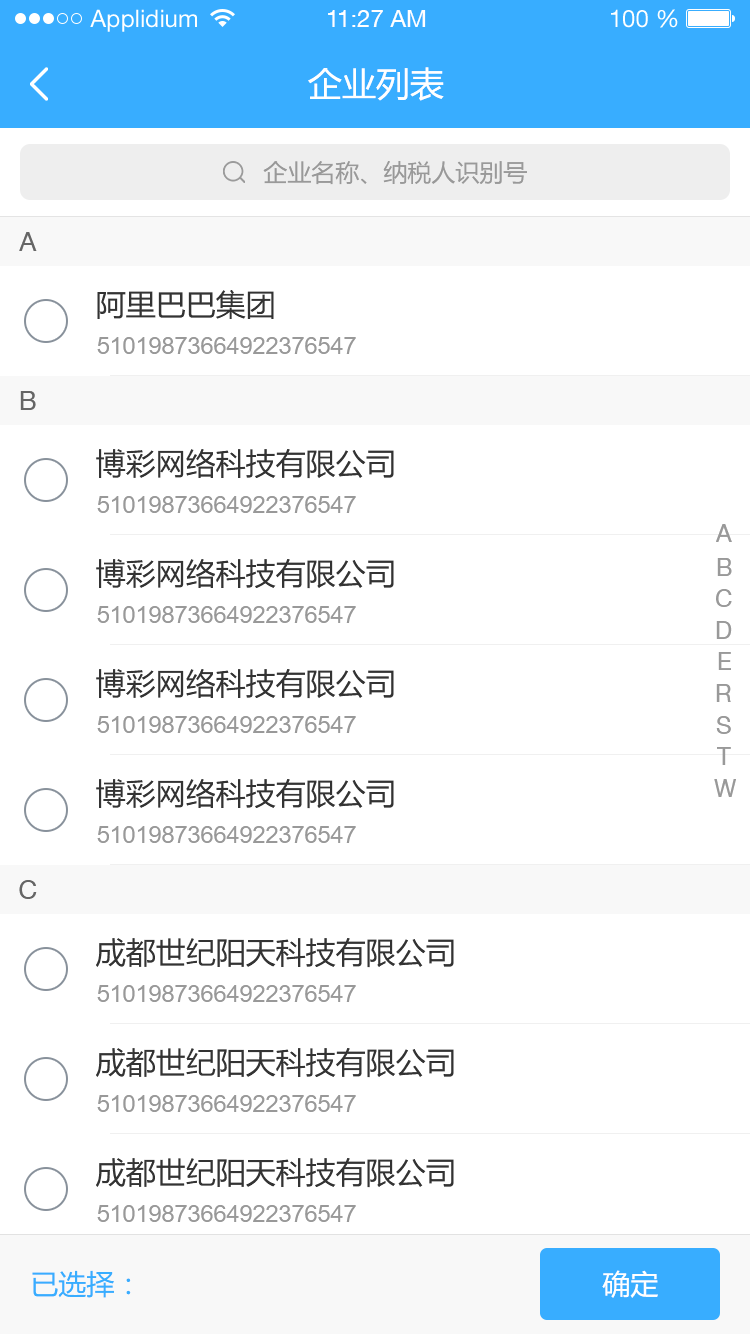
<style>
.page{position:relative;width:750px;height:1334px;background:#ffffff}
.page>*{position:absolute;margin:0}
.t1{font:24px "HelveticaNeueLTStd-Roman";color:#ffffff}
.t2{font:24px "HelveticaNeueCE-Roman";color:#ffffff}
.t3{font:34px "MicrosoftYaHei";color:#ffffff}
.t4{font:24px "MicrosoftYaHei";color:#999999}
.t5{font:26px "HelveticaNeueLTPro-Roman";color:#666666}
.t6{font:30px "MicrosoftYaHei";color:#333333}
.t7{font:24px "ArialMT";color:#999999}
.t8{font:24px "HelveticaNeueLTPro-Roman";color:#999999}
.t9{font:28px "MicrosoftYaHei";color:#38adff}
.t10{font:28px "MicrosoftYaHei";color:#ffffff}
</style>
<div class="page">
<p class="t1" style="left:90px;top:9px;width:107px;height:23px">Applidium</p>
<p class="t2" style="left:328px;top:10px;width:98px;height:17px">11:27 AM</p>
<p class="t1" style="left:611px;top:9px;width:67px;height:19px">100 %</p>
<p class="t3" style="left:308px;top:67px;width:136px;height:34px">企业列表</p>
<p class="t4" style="left:263px;top:161px;width:264px;height:24px">企业名称、纳税人识别号</p>
<p class="t5" style="left:19px;top:232px;width:18px;height:19px">A</p>
<p class="t6" style="left:97px;top:290px;width:177px;height:29px">阿里巴巴集团</p>
<p class="t7" style="left:97px;top:337px;width:259px;height:17px">51019873664922376547</p>
<p class="t5" style="left:20px;top:391px;width:16px;height:19px">B</p>
<p class="t6" style="left:96px;top:449px;width:298px;height:30px">博彩网络科技有限公司</p>
<p class="t7" style="left:97px;top:496px;width:259px;height:17px">51019873664922376547</p>
<p class="t8" style="left:716px;top:524px;width:16px;height:18px">A</p>
<p class="t8" style="left:717px;top:558px;width:15px;height:18px">B</p>
<p class="t6" style="left:96px;top:559px;width:298px;height:30px">博彩网络科技有限公司</p>
<p class="t8" style="left:716px;top:589px;width:16px;height:18px">C</p>
<p class="t7" style="left:97px;top:606px;width:259px;height:17px">51019873664922376547</p>
<p class="t8" style="left:716px;top:621px;width:16px;height:18px">D</p>
<p class="t8" style="left:718px;top:652px;width:13px;height:18px">E</p>
<p class="t6" style="left:96px;top:669px;width:298px;height:30px">博彩网络科技有限公司</p>
<p class="t8" style="left:716px;top:684px;width:15px;height:18px">R</p>
<p class="t7" style="left:97px;top:716px;width:259px;height:17px">51019873664922376547</p>
<p class="t8" style="left:716px;top:716px;width:15px;height:18px">S</p>
<p class="t8" style="left:717px;top:747px;width:14px;height:18px">T</p>
<p class="t6" style="left:96px;top:779px;width:298px;height:30px">博彩网络科技有限公司</p>
<p class="t8" style="left:714px;top:779px;width:22px;height:18px">W</p>
<p class="t7" style="left:97px;top:826px;width:259px;height:17px">51019873664922376547</p>
<p class="t5" style="left:19px;top:880px;width:18px;height:19px">C</p>
<p class="t6" style="left:96px;top:938px;width:358px;height:30px">成都世纪阳天科技有限公司</p>
<p class="t7" style="left:97px;top:985px;width:259px;height:17px">51019873664922376547</p>
<p class="t6" style="left:96px;top:1048px;width:358px;height:30px">成都世纪阳天科技有限公司</p>
<p class="t7" style="left:97px;top:1095px;width:259px;height:17px">51019873664922376547</p>
<p class="t6" style="left:96px;top:1158px;width:358px;height:30px">成都世纪阳天科技有限公司</p>
<p class="t7" style="left:97px;top:1205px;width:259px;height:17px">51019873664922376547</p>
<p class="t9" style="left:32px;top:1270px;width:99px;height:28px">已选择：</p>
<p class="t10" style="left:602px;top:1270px;width:56px;height:28px">确定</p>
</div>
